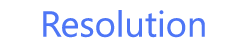
<style>
.page{position:relative;width:250px;height:50px;background:#ffffff}
.page>*{position:absolute;margin:0}
.t1{font:36px "SegoeUI";color:#4e76f6}
</style>
<div class="page">
<p class="t1" style="left:43px;top:10px;width:162px;height:28px">Resolution</p>
</div>
